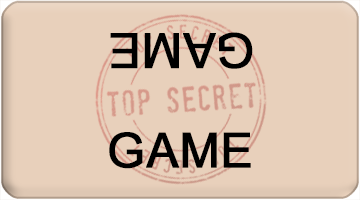
<style>
.page{position:relative;width:360px;height:200px;background:#e8d0bb}
.page>*{position:absolute;margin:0}
.t1{font:48px "ArialMT";color:#000000;font-weight:bold}
</style>
<div class="page">
<p class="t1" style="left:110px;top:32px;width:143px;height:37px;rotate:180deg">GAME</p>
<p class="t1" style="left:109px;top:132px;width:142px;height:37px">GAME</p>
</div>
